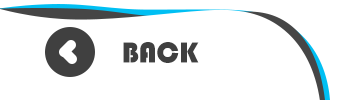
<style>
.page{position:relative;width:340px;height:100px;background:#ffffff}
.page>*{position:absolute;margin:0}
.t1{font:30px "Bauhaus93";color:#404040}
</style>
<div class="page">
<p class="t1" style="left:123px;top:42px;width:76px;height:21px">BACK</p>
</div>
